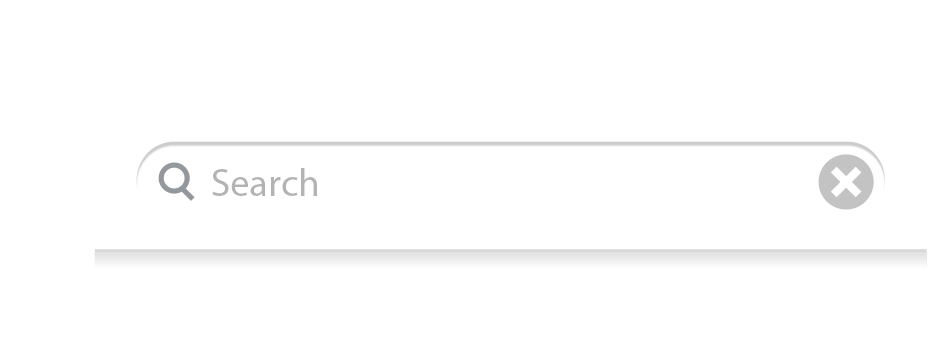
<style>
.page{position:relative;width:928px;height:360px;background:#ffffff}
.page>*{position:absolute;margin:0}
.t1{font:39px "MyriadPro-Regular";color:#b4b3b4}
</style>
<div class="page">
<p class="t1" style="left:212px;top:168px;width:105px;height:28px">Search</p>
</div>
